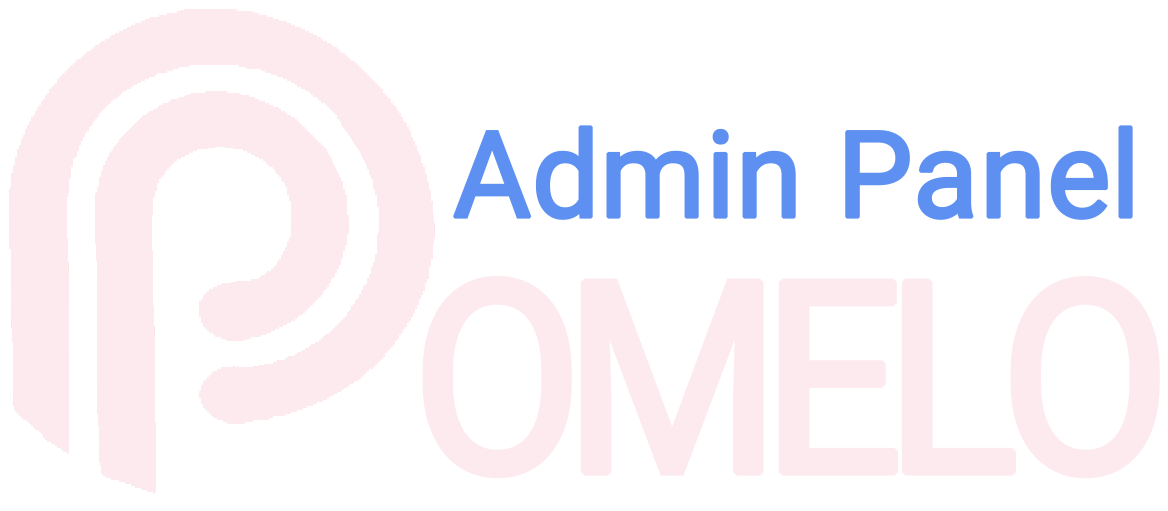
<style>
.page{position:relative;width:1168px;height:511px;background:#ffffff}
.page>*{position:absolute;margin:0}
.t1{font:120px "Vazir";letter-spacing:-0.02em;color:#5e90f1;font-weight:bold}
.t2{font:266.7px "Vazir";letter-spacing:-0.1em;color:#fdeaee;font-weight:bold;scale:0.93 1}
</style>
<div class="page">
<p class="t1" style="left:453px;top:125px;width:680px;height:95px">Admin Panel</p>
<p class="t2" style="left:422px;top:275px;width:738px;height:204px">OMELO</p>
</div>
